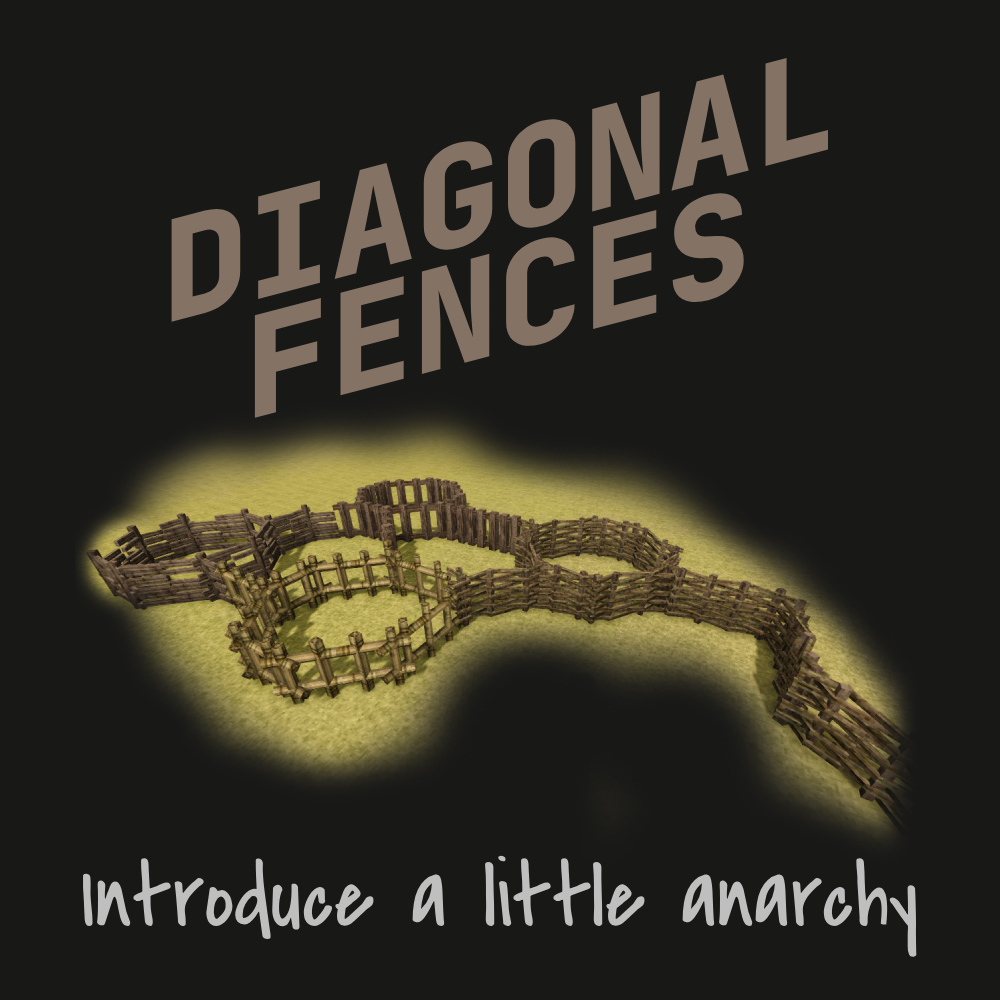
<style>
.page{position:relative;width:1000px;height:1000px;background:#181817}
.page>*{position:absolute;margin:0}
.t1{font:140.3px "JetBrainsMonoRoman-ExtraBold";color:#847364;scale:1.03 1}
.t2{font:91.7px "CoveredByYourGrace";color:#bfbfbf}
</style>
<div class="page">
<p class="t1" style="left:171px;top:58px;width:657px;height:264px;rotate:-15deg">DIAGONAL</p>
<p class="t1" style="left:254px;top:193px;width:490px;height:225px;rotate:-15deg">FENCES</p>
<p class="t2" style="left:83px;top:855px;width:834px;height:102px">Introduce a little anarchy</p>
</div>
